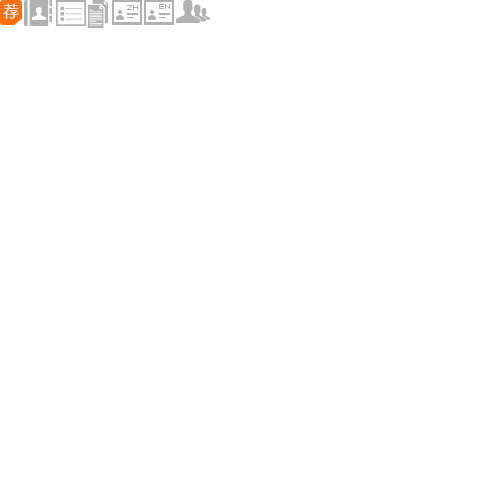
<style>
.page{position:relative;width:500px;height:500px;background:#ffffff}
.page>*{position:absolute;margin:0}
.t1{font:16px "FZZQJW--GB1-0";color:#ffffff}
.t2{font:6px "04b21";color:#b1b1b1}
</style>
<div class="page">
<p class="t1" style="left:3px;top:3px;width:16px;height:16px">荐</p>
<p class="t2" style="left:127px;top:5px;width:11px;height:5px">ZH</p>
</div>
